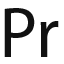
<style>
.page{position:relative;width:64px;height:64px;background:#ffffff}
.page>*{position:absolute;margin:0}
.t1{font:72px "MyriadPro-Regular";color:#111111}
</style>
<div class="page">
<p class="t1" style="left:4px;top:8px;width:55px;height:49px">Pr</p>
</div>
